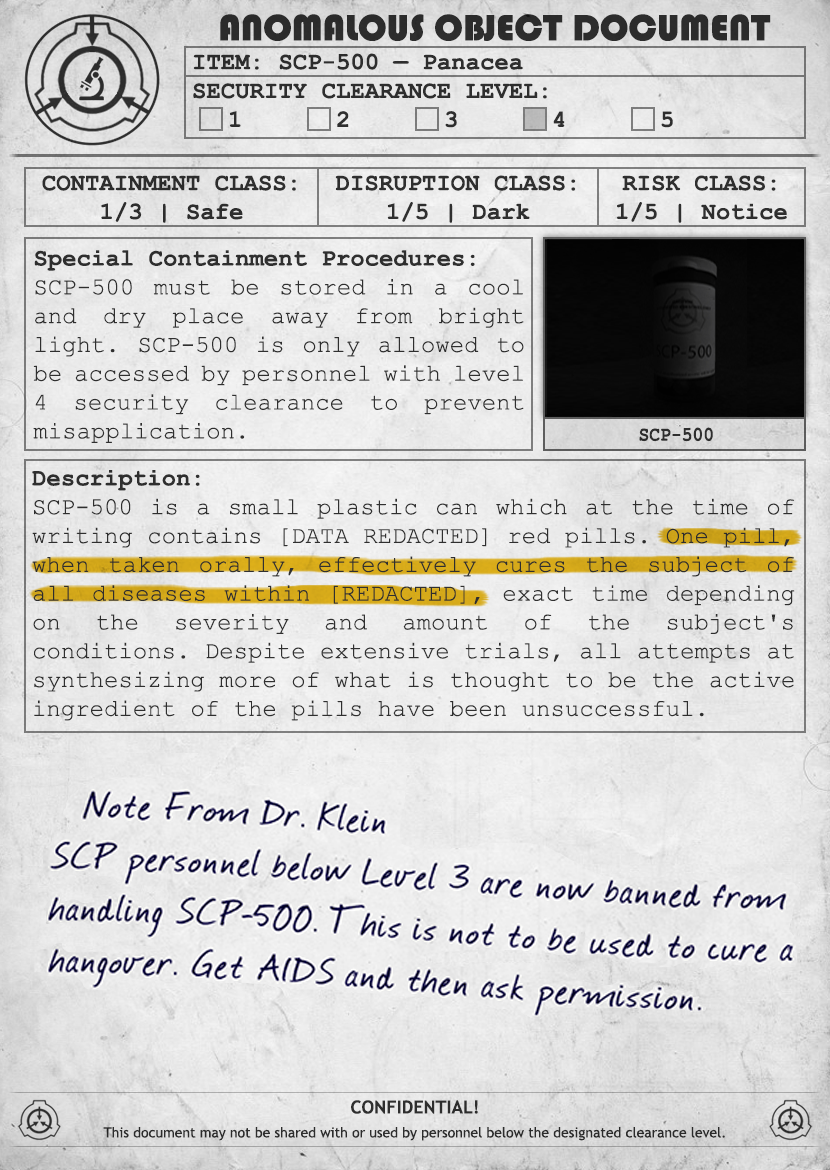
<style>
.page{position:relative;width:830px;height:1170px}
.page>*{position:absolute;margin:0}
.t1{font:38px "Bauhaus93";color:#333333;text-transform:uppercase}
.t2{font:24px "CourierNewPS-BoldMT";color:#333333;text-transform:uppercase}
.t3{font:24px "CourierNewPS-BoldMT";color:#333333}
.t4{font:24px "CourierNewPSMT";color:#333333}
.t5{font:20.1px "CourierNewPS-BoldMT";color:#333333;scale:0.9 1}
.t6{font:14px/24px "TrebuchetMS";color:#333333}
.t7{font:18px/24px "TrebuchetMS-Bold";color:#333333}
</style>
<div class="page">
<p class="t1" style="left:220px;top:14px;width:551px;height:27px">anomalous object document</p>
<p class="t2" style="left:193px;top:53px;width:480px;height:75px"><span class="t3">ITEM: SCP-500 — Panacea<br></span>Security CLEARANCE LEVEL:<span class="t3"> <br> 1   2   3   4   5</span></p>
<p class="t3" style="left:42px;top:175px;width:254px;height:48px;text-align:center">CONTAINMENT CLASS:<br>1/3 | Safe</p>
<p class="t3" style="left:335px;top:175px;width:241px;height:48px;text-align:center">DISRUPTION CLASS:<br>1/5 | Dark</p>
<p class="t3" style="left:617px;top:175px;width:170px;height:48px;text-align:center">RISK CLASS:<br>1/5 | Notice</p>
<p class="t4" style="left:33px;top:250px;width:491px;height:193px;text-align:justify"><span class="t3">Special Containment Procedures:<br></span>SCP-500 must be stored in a cool and dry place away from bright light. SCP-500 is only allowed to be accessed by personnel with level 4 security clearance to prevent misapplication.</p>
<p class="t5" style="left:639px;top:427px;width:74px;height:15px">SCP-500</p>
<p class="t4" style="left:32px;top:470px;width:763px;height:251px;text-align:justify"><span class="t3">Description:<br></span>SCP-500 is a small plastic can which at the time of writing contains [DATA REDACTED] red pills. One pill, when taken orally, effectively cures the subject of all diseases within [REDACTED], exact time depending on the severity and amount of the subject's conditions. Despite extensive trials, all attempts at synthesizing more of what is thought to be the active ingredient of the pills have been unsuccessful.</p>
<p class="t6" style="left:103px;top:1100px;width:622px;height:41px;text-align:center"><span class="t7">CONFIDENTIAL!<br></span>This document may not be shared with or used by personnel below the designated clearance level.</p>
</div>
